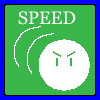
<style>
.page{position:relative;width:100px;height:100px;background:#39b54a}
.page>*{position:absolute;margin:0}
.t1{font:18px "Georgia";color:#ffffff}
</style>
<div class="page">
<p class="t1" style="left:18px;top:11px;width:58px;height:14px">SPEED</p>
</div>
